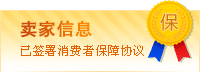
<style>
.page{position:relative;width:200px;height:72px}
.page>*{position:absolute;margin:0}
.t1{font:18px "MicrosoftYaHei";letter-spacing:0.05em;color:#d27508}
.t2{font:17px "HeitiCSEG-Medium-GB";letter-spacing:0.05em;font-weight:bold}
.t3{font:12px "SimSun";letter-spacing:0.05em;color:#e26204}
</style>
<div class="page">
<p class="t1" style="left:160px;top:13px;width:18px;height:18px">保</p>
<p class="t2" style="left:20px;top:20px;width:72px;height:18px">卖家信息</p>
<p class="t3" style="left:21px;top:45px;width:123px;height:11px">已签署消费者保障协议</p>
</div>
